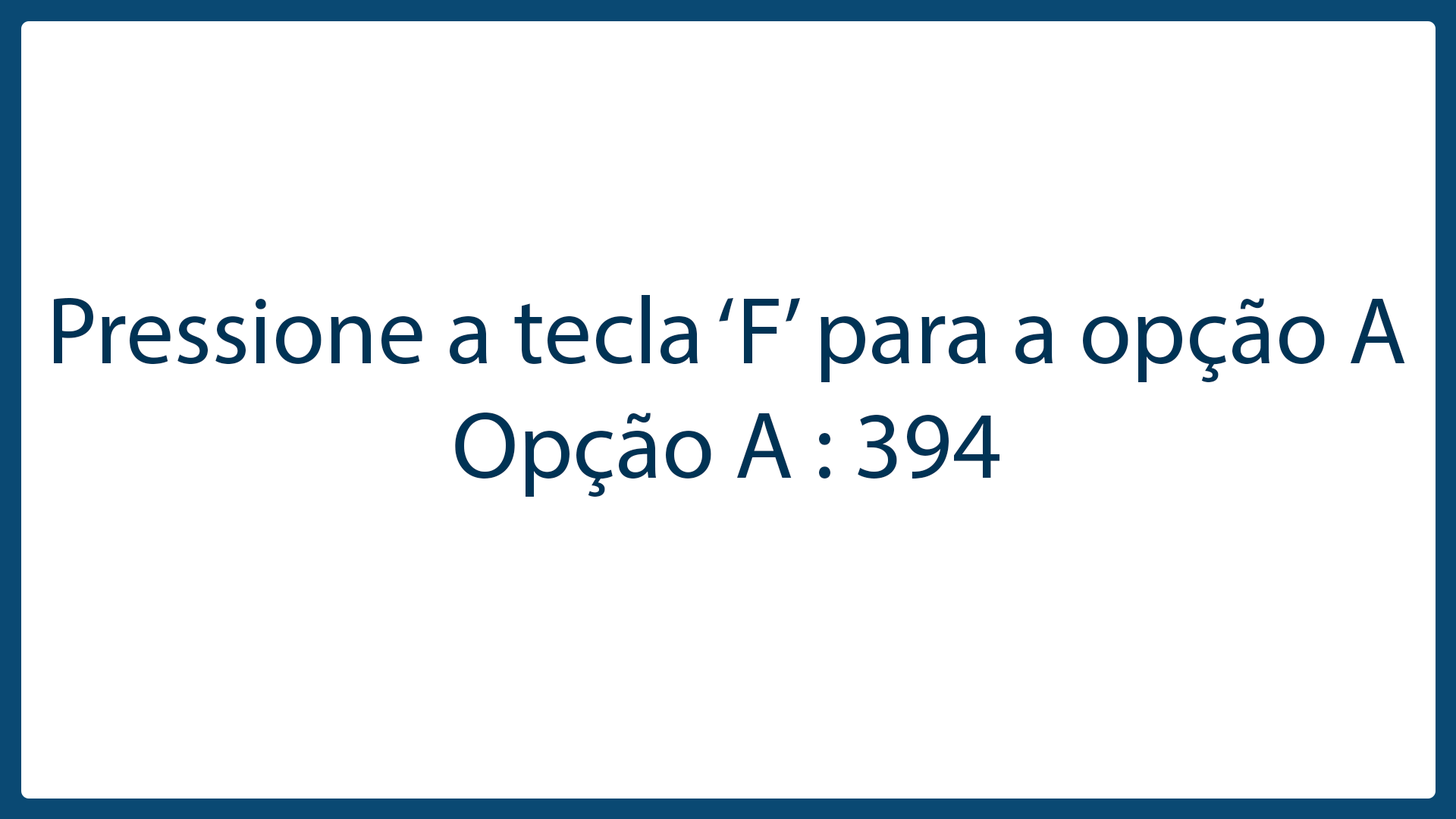
<style>
.page{position:relative;width:1456px;height:819px;background:#ffffff}
.page>*{position:absolute;margin:0}
.t1{font:95.9px "MyriadPro-Regular";color:#003355}
</style>
<div class="page">
<p class="t1" style="left:54px;top:295px;width:1351px;height:202px">Pressione a tecla ‘F’ para a opção A<br>                    Opção A : 394</p>
</div>
